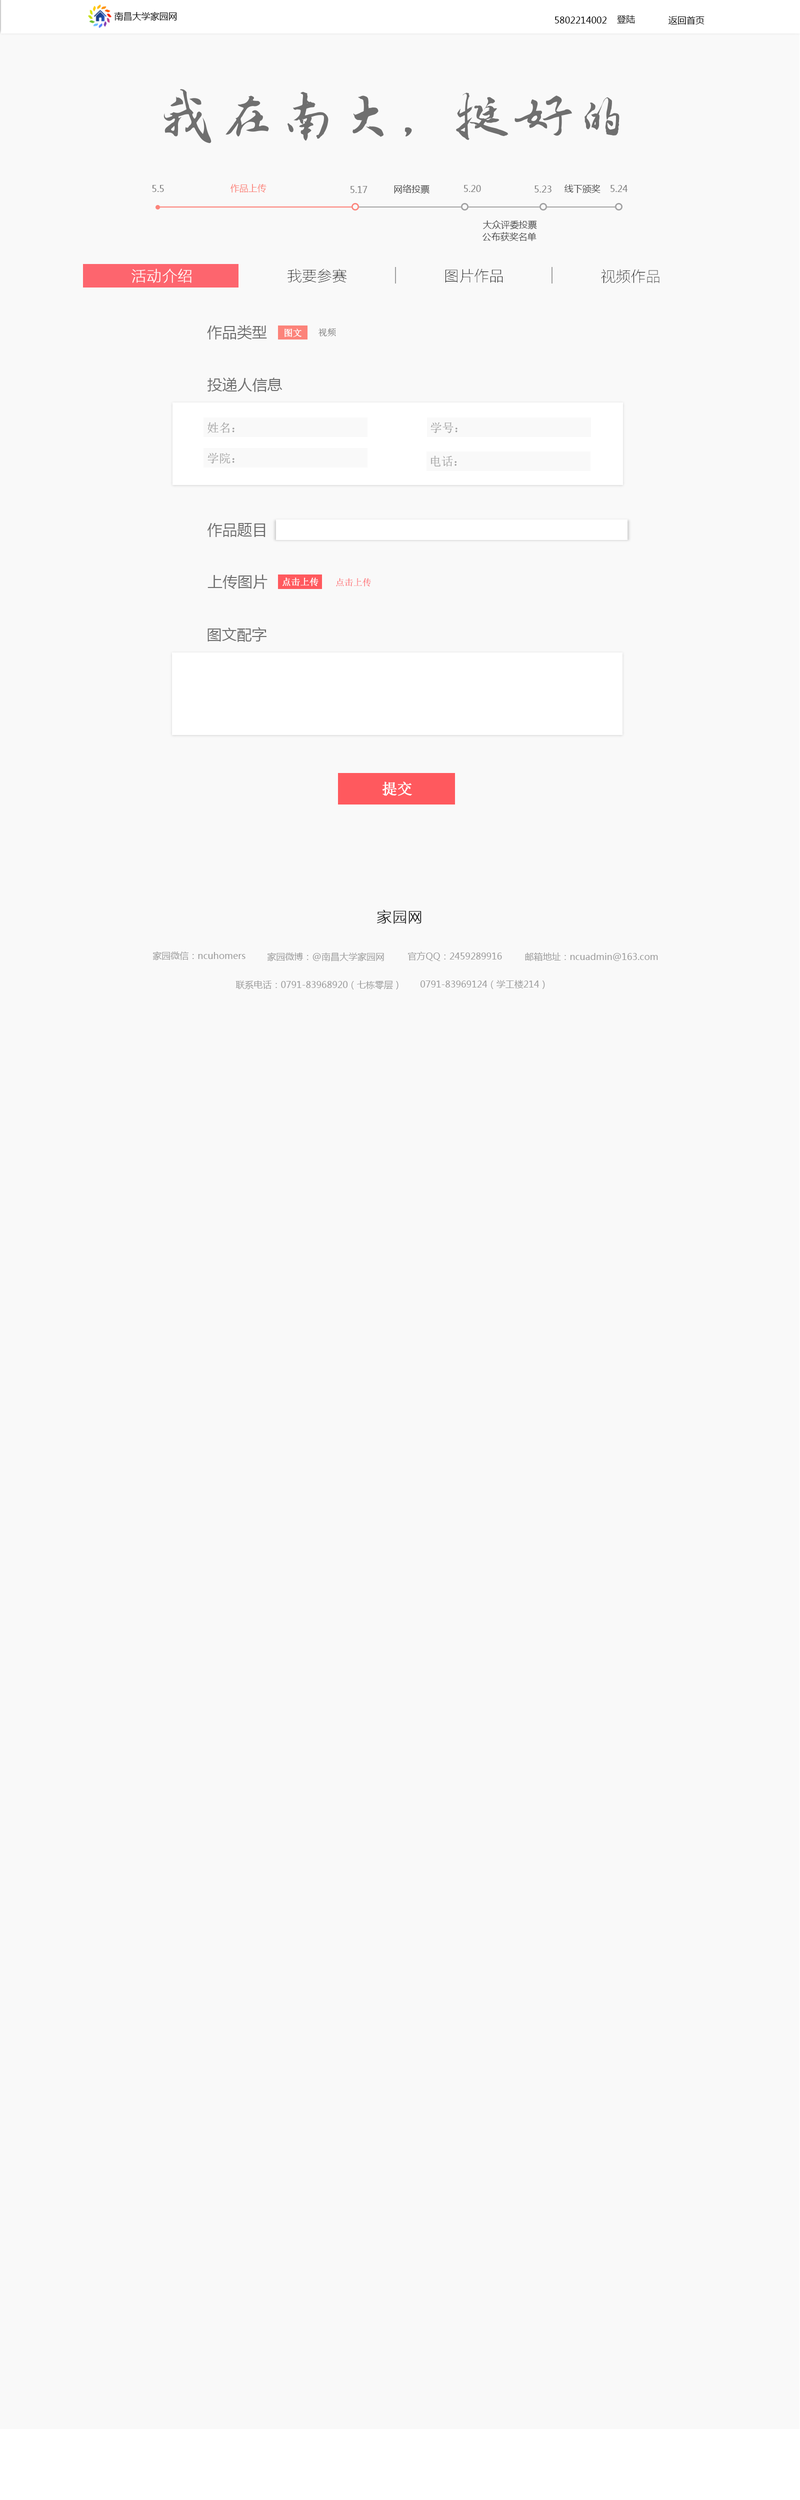
<style>
.page{position:relative;width:800px;height:2500px;background:#f9f9f9}
.page>*{position:absolute;margin:0}
.t1{font:9px "MicrosoftYaHei";color:#000000}
.t2{font:60px "FZZJ-LJDFONT";color:#6f6f6f}
.t3{font:9px "MicrosoftYaHei";color:#808080}
.t4{font:9px "MicrosoftYaHei";color:#fc837a}
.t5{font:9px "MicrosoftYaHei";color:#494949}
.t6{font:15px "FZLTCXHJW--GB1-0";color:#ffffff;font-weight:bold}
.t7{font:15px "FZLTCXHJW--GB1-0";color:#000000}
.t8{font:15px "MicrosoftYaHei";color:#6f6f6f}
.t9{font:9px "SimSun";color:#ffffff;font-weight:bold}
.t10{font:9px "SimSun";color:#6f6f6f}
.t11{font:12px "SimSun";color:#9e9e9e}
.t12{font:9px "SimSun";color:#ff595e}
.t13{font:15px "SimSun";color:#ffffff;font-weight:bold}
.t14{font:15px "FZLTCXHJW--GB1-0";color:#010101;font-weight:bold}
.t15{font:9px "MicrosoftYaHei";color:#9c9c9c}
</style>
<div class="page">
<p class="t1" style="left:114px;top:12px;width:63px;height:9px">南昌大学家园网</p>
<p class="t1" style="left:554px;top:16px;width:52px;height:8px">5802214002</p>
<p class="t1" style="left:617px;top:15px;width:18px;height:9px">登陆</p>
<p class="t1" style="left:668px;top:16px;width:36px;height:8px">返回首页</p>
<p class="t2" style="left:164px;top:89px;width:456px;height:55px">我在南大，挺好的</p>
<p class="t3" style="left:152px;top:185px;width:12px;height:7px">5.5</p>
<p class="t4" style="left:230px;top:184px;width:36px;height:8px">作品上传</p>
<p class="t5" style="left:394px;top:184px;width:36px;height:10px">网络投票</p>
<p class="t3" style="left:464px;top:185px;width:17px;height:7px">5.20</p>
<p class="t3" style="left:534px;top:186px;width:18px;height:6px">5.23</p>
<p class="t5" style="left:564px;top:184px;width:36px;height:9px">线下颁奖</p>
<p class="t3" style="left:610px;top:185px;width:18px;height:7px">5.24</p>
<p class="t3" style="left:350px;top:186px;width:18px;height:7px">5.17</p>
<p class="t5" style="left:483px;top:220px;width:54px;height:10px">大众评委投票</p>
<p class="t5" style="left:482px;top:232px;width:54px;height:9px">公布获奖名单</p>
<p class="t6" style="left:132px;top:268px;width:60px;height:15px">活动介绍</p>
<p class="t7" style="left:288px;top:268px;width:59px;height:15px">我要参赛</p>
<p class="t7" style="left:446px;top:268px;width:56px;height:15px">图片作品</p>
<p class="t7" style="left:601px;top:269px;width:59px;height:15px">视频作品</p>
<p class="t8" style="left:207px;top:325px;width:60px;height:15px">作品类型</p>
<p class="t9" style="left:284px;top:328px;width:18px;height:9px">图文</p>
<p class="t10" style="left:318px;top:328px;width:18px;height:8px">视频</p>
<p class="t8" style="left:208px;top:378px;width:74px;height:14px">投递人信息</p>
<p class="t11" style="left:208px;top:422px;width:26px;height:12px">姓名：</p>
<p class="t11" style="left:430px;top:422px;width:28px;height:12px">学号：</p>
<p class="t11" style="left:208px;top:452px;width:26px;height:12px">学院：</p>
<p class="t11" style="left:431px;top:456px;width:26px;height:11px">电话：</p>
<p class="t8" style="left:208px;top:523px;width:58px;height:14px">作品题目</p>
<p class="t8" style="left:208px;top:574px;width:60px;height:15px">上传图片</p>
<p class="t9" style="left:282px;top:578px;width:36px;height:8px">点击上传</p>
<p class="t12" style="left:336px;top:578px;width:35px;height:8px">点击上传</p>
<p class="t8" style="left:208px;top:627px;width:58px;height:15px">图文配字</p>
<p class="t13" style="left:382px;top:782px;width:30px;height:14px">提交</p>
<p class="t14" style="left:377px;top:910px;width:45px;height:14px">家园网</p>
<p class="t15" style="left:152px;top:951px;width:94px;height:9px">家园微信：ncuhomers</p>
<p class="t15" style="left:267px;top:952px;width:117px;height:10px">家园微博：@南昌大学家园网</p>
<p class="t15" style="left:408px;top:952px;width:94px;height:9px">官方QQ：2459289916</p>
<p class="t15" style="left:525px;top:952px;width:133px;height:9px">邮箱地址：ncuadmin@163.com</p>
<p class="t15" style="left:236px;top:980px;width:162px;height:10px">联系电话：0791-83968920（七栋零层）</p>
<p class="t15" style="left:420px;top:980px;width:125px;height:9px">0791-83969124（学工楼214）</p>
</div>
